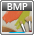
<style>
.page{position:relative;width:34px;height:36px}
.page>*{position:absolute;margin:0}
.t1{font:11px "Calibri";color:#ffffff}
</style>
<div class="page">
<p class="t1" style="left:7px;top:3px;width:21px;height:7px">BMP</p>
</div>
